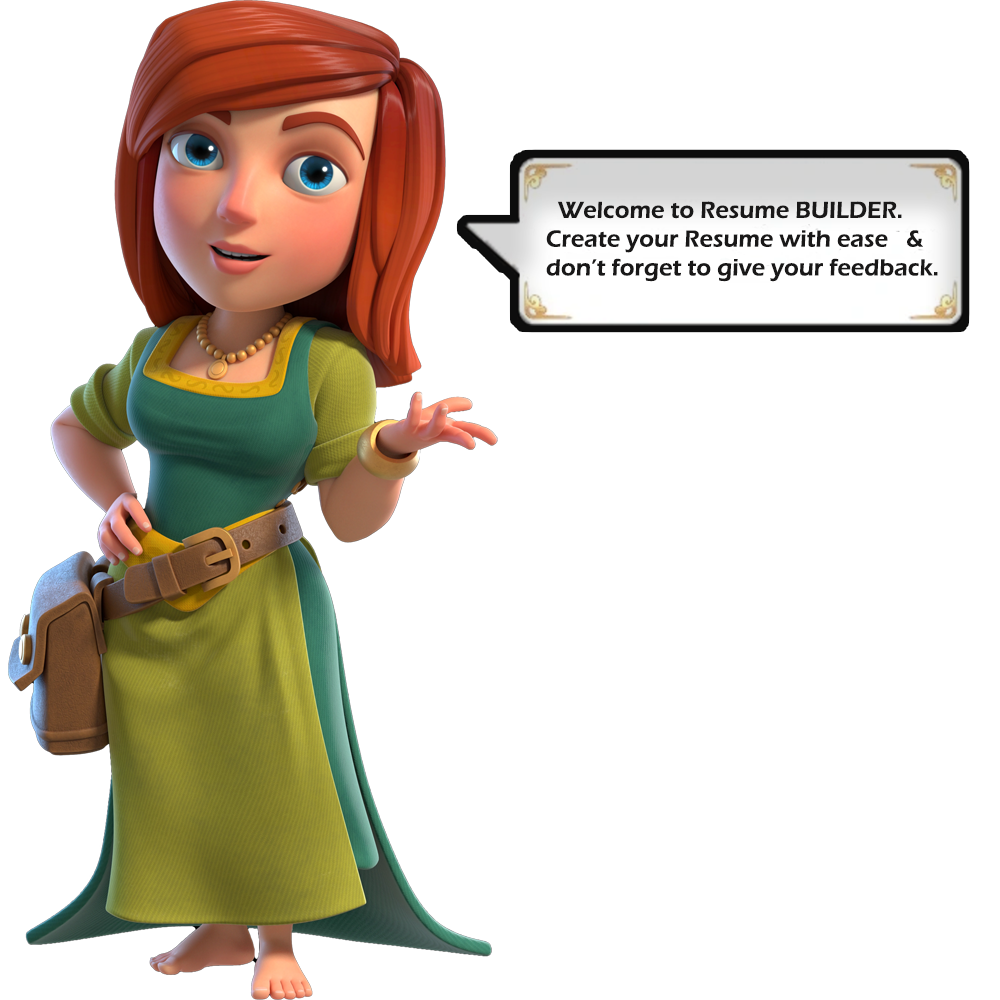
<style>
.page{position:relative;width:1000px;height:1000px;background:#ffffff}
.page>*{position:absolute;margin:0}
.t1{font:24px "ErasITC-Demi";color:#191818}
</style>
<div class="page">
<p class="t1" style="left:546px;top:201px;width:392px;height:81px">Welcome to Resume BUILDER.<br>Create your Resume with ease   &amp; <br>don’t forget to give your feedback.</p>
</div>
